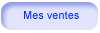
<style>
.page{position:relative;width:100px;height:33px;background:#e1e4fc}
.page>*{position:absolute;margin:0}
.t1{font:11px "ArialMT";color:#092ff6}
</style>
<div class="page">
<p class="t1" style="left:24px;top:11px;width:55px;height:8px">Mes ventes</p>
</div>
